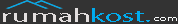
<style>
.page{position:relative;width:178px;height:24px;background:#333333}
.page>*{position:absolute;margin:0}
.t1{font:18.6px "MyriadPro-Regular";color:#e3dfdf;scale:1.73 1}
.t2{font:18.6px "MyriadPro-Regular";color:#00acee;scale:1.66 1}
.t3{font:8.3px "MyriadPro-Regular";color:#f8fafb;scale:1.66 1}
</style>
<div class="page">
<p class="t1" style="left:3px;top:8px;width:86px;height:14px">rumah</p>
<p class="t2" style="left:92px;top:8px;width:58px;height:14px">kost.</p>
<p class="t3" style="left:154px;top:17px;width:23px;height:4px">com</p>
</div>
